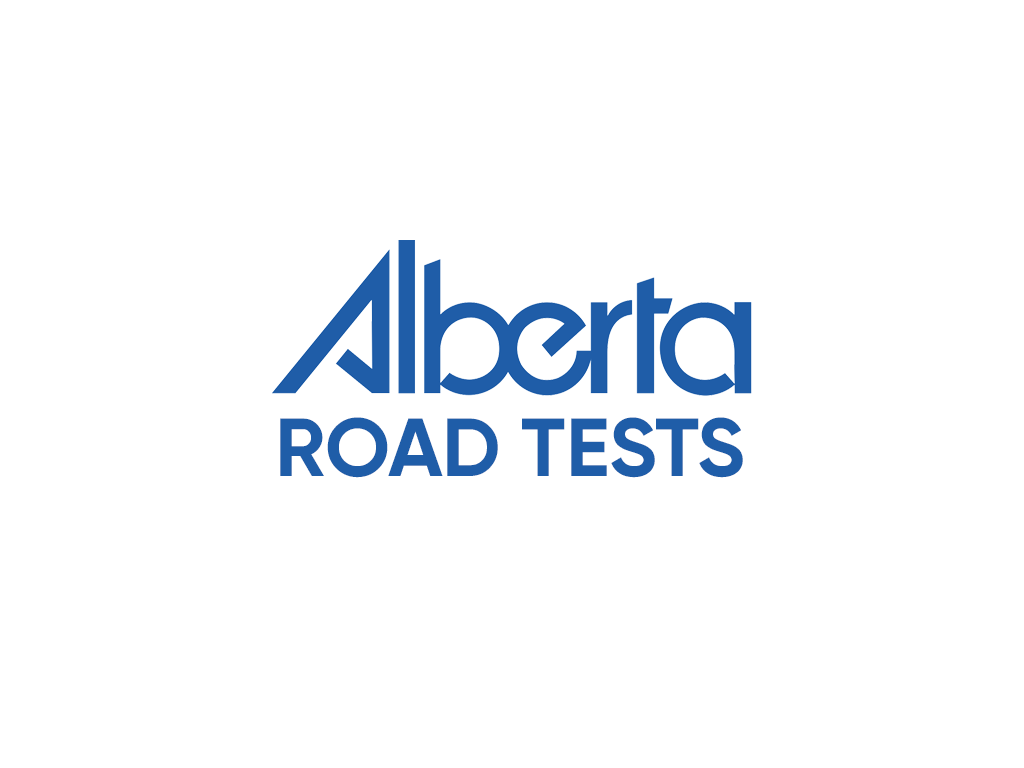
<style>
.page{position:relative;width:1024px;height:768px;background:#ffffff}
.page>*{position:absolute;margin:0}
.t1{font:82px "Gilroy-Bold";color:#1f5da8}
</style>
<div class="page">
<p class="t1" style="left:280px;top:417px;width:463px;height:61px">ROAD TESTS</p>
</div>
